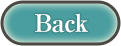
<style>
.page{position:relative;width:121px;height:46px}
.page>*{position:absolute;margin:0}
.t1{font:24px "RyuminPro-ExBold";letter-spacing:-0.04em;color:#ffffff}
</style>
<div class="page">
<p class="t1" style="left:35px;top:13px;width:53px;height:20px">Back</p>
</div>
